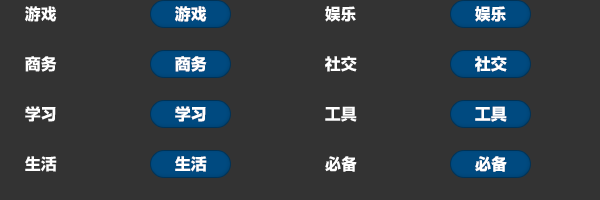
<style>
.page{position:relative;width:600px;height:200px;background:#333333}
.page>*{position:absolute;margin:0}
.t1{font:16px/50px "LiHeiPro-Bold";color:#ffffff}
</style>
<div class="page">
<p class="t1" style="left:25px;top:6px;width:332px;height:166px">游戏                                                  娱乐<br>商务                                                  社交<br>学习                                                  工具<br>生活                                                  必备</p>
<p class="t1" style="left:175px;top:6px;width:332px;height:166px">游戏                                                  娱乐<br>商务                                                  社交<br>学习                                                  工具<br>生活                                                  必备</p>
</div>
